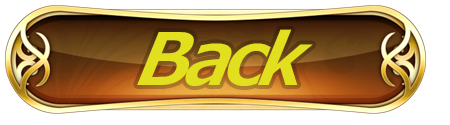
<style>
.page{position:relative;width:450px;height:125px;background:#ffffff}
.page>*{position:absolute;margin:0}
.t1{font:72px "Meiryo-BoldItalic";letter-spacing:-0.075em;color:#e1df1e;font-style:italic}
</style>
<div class="page">
<p class="t1" style="left:137px;top:29px;width:176px;height:57px">Back</p>
</div>
